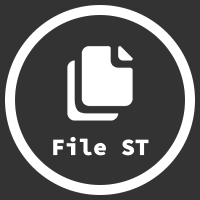
<style>
.page{position:relative;width:200px;height:200px;background:#333333}
.page>*{position:absolute;margin:0}
.t1{font:23.4px "SourceCodeRoman-Black";color:#ffffff}
</style>
<div class="page">
<p class="t1" style="left:53px;top:136px;width:96px;height:20px">File ST</p>
</div>
